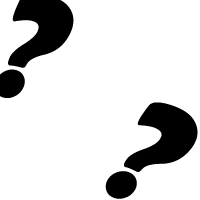
<style>
.page{position:relative;width:200px;height:200px;background:#ffffff}
.page>*{position:absolute;margin:0}
.t1{font:155px "BerlinSansFBDemi-Bold";letter-spacing:0.07em;color:#000000;font-weight:bold;font-style:italic;scale:0.97 1}
</style>
<div class="page">
<p class="t1" style="left:105px;top:102px;width:93px;height:97px;rotate:28deg">?</p>
</div>
